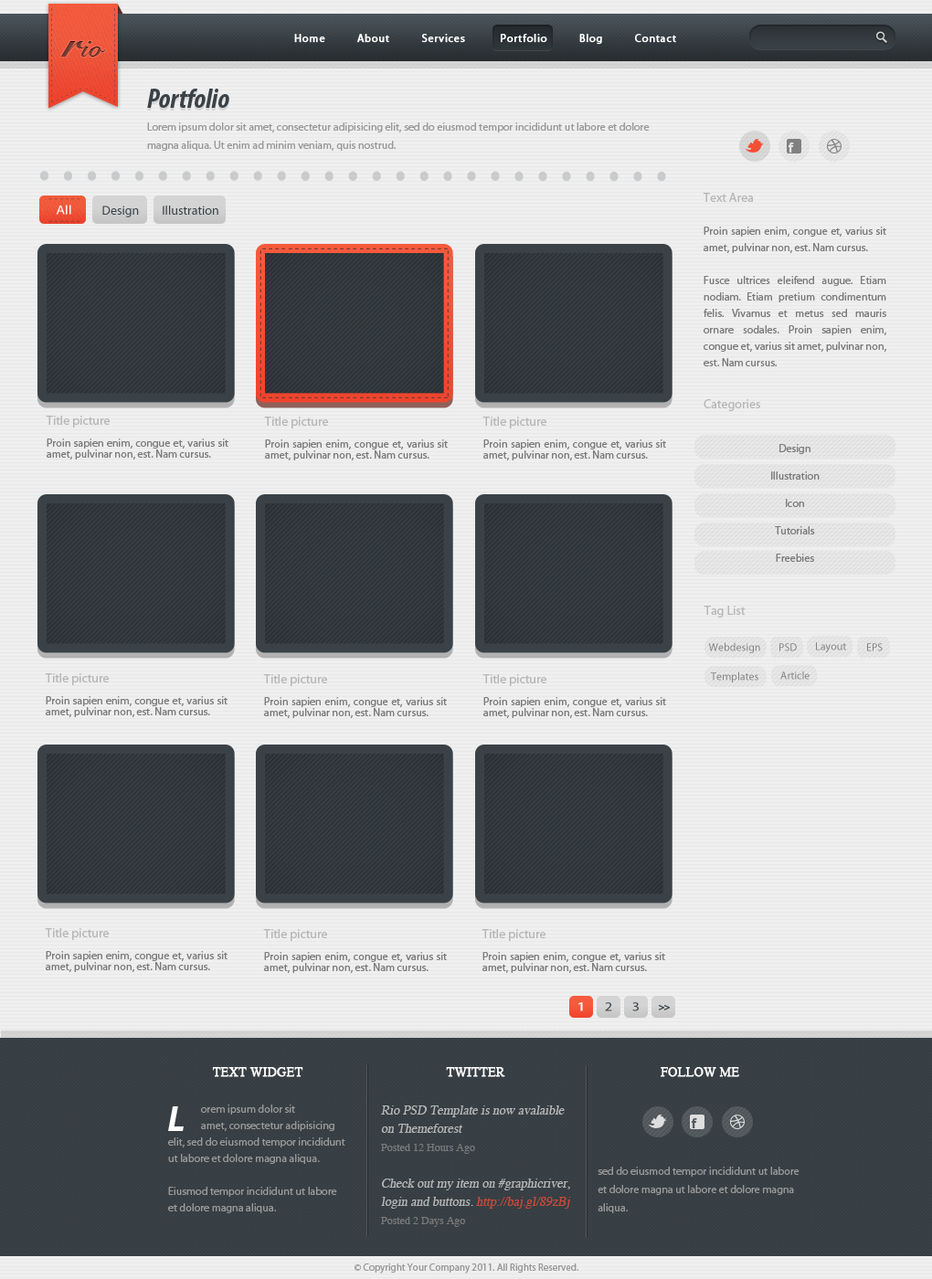
<style>
.page{position:relative;width:932px;height:1279px}
.page>*{position:absolute;margin:0}
.t1{font:27.4px "SnellRoundhand-Bold";color:#783c32}
.t2{font:43.9px "SnellRoundhand-Bold";color:#783c32}
.t3{font:11px "MyriadPro-Regular";letter-spacing:0.05em;color:#ffffff;font-weight:bold}
.t4{font:27.4px "MyriadPro-BoldCondIt";color:#3a4247}
.t5{font:11px/18.3px "MyriadPro-Regular";color:#999999}
.t6{font:54.8px "MyriadPro-BoldCond";letter-spacing:0.2em;color:#cbcccd}
.t7{font:11px/16.4px "MyriadPro-Regular";color:#7b7b7b}
.t8{font:12.8px/32.9px "MyriadPro-Regular";color:#b6b6b6}
.t9{font:12.7px "MyriadPro-Regular";color:#ffffff;scale:1.15 1}
.t10{font:12.8px "MyriadPro-Regular";color:#3a4247}
.t11{font:11px/27.4px "MyriadPro-Regular";color:#7b7b7b}
.t12{font:11px/11px "MyriadPro-Regular";color:#7b7b7b}
.t13{font:12.8px/11px "MyriadPro-Regular";color:#b6b6b6}
.t14{font:12.8px "MyriadPro-Regular";color:#b6b6b6}
.t15{font:11px "MyriadPro-Regular";color:#808080}
.t16{font:12.8px "MyriadPro-Semibold";color:#ffffff;scale:1.15 1}
.t17{font:12.8px "MyriadPro-Regular";color:#3a4247;scale:1.15 1}
.t18{font:9.1px "MyriadPro-Semibold";letter-spacing:-0.1em;color:#3a4247;font-weight:bold;scale:1.15 1}
.t19{font:11px/16.4px "MyriadPro-Regular";color:#999999}
.t20{font:12.8px/20.1px "Times-Roman";color:#ffffff;text-transform:uppercase;font-weight:bold}
.t21{font:12.8px/18.3px "Times-Roman";color:#b6b6b6;font-style:italic}
.t22{font:11px/18.3px "Times-Roman";color:#7a7a7a}
.t23{font:12.8px/18.3px "Times-Roman";color:#c9493b;font-style:italic}
.t24{font:36.6px "MyriadPro-BoldIt";color:#ffffff}
.t25{font:10.1px "MyriadPro-Regular";color:#999999}
</style>
<div class="page">
<p class="t1" style="left:61px;top:41px;width:45px;height:16px"><span class="t2">r</span>io</p>
<p class="t3" style="left:294px;top:34px;width:382px;height:11px">Home          About          Services           Portfolio          Blog          Contact</p>
<p class="t4" style="left:147px;top:89px;width:82px;height:19px">Portfolio</p>
<p class="t5" style="left:147px;top:122px;width:503px;height:29px">Lorem ipsum dolor sit amet, consectetur adipisicing elit, sed do eiusmod tempor incididunt ut labore et dolore magna aliqua. Ut enim ad minim veniam, quis nostrud.</p>
<p class="t6" style="left:40px;top:171px;width:626px;height:11px">...........................</p>
<p class="t7" style="left:703px;top:193px;width:183px;height:173px;text-align:justify"><span class="t8">Text Area<br><br></span>Proin sapien enim, congue et, varius sit amet, pulvinar non, est. Nam cursus.<br><br>Fusce ultrices eleifend augue. Etiam nodiam. Etiam pretium condimentum felis. Vivamus et metus sed mauris ornare sodales. Proin sapien enim, congue et, varius sit amet, pulvinar non, est. Nam cursus.</p>
<p class="t9" style="left:56px;top:205px;width:15px;height:10px">All</p>
<p class="t10" style="left:102px;top:206px;width:37px;height:11px">Design</p>
<p class="t10" style="left:163px;top:206px;width:55px;height:9px">Illustration</p>
<p class="t11" style="left:704px;top:399px;width:116px;height:163px;text-align:justify"><span class="t8">Categories<br><br></span>Design<br>Illustration<br>Icon<br>Tutorials<br>Freebies</p>
<p class="t12" style="left:46px;top:416px;width:182px;height:44px;text-align:justify"><span class="t13">Title picture<br><br></span>Proin sapien enim, congue et, varius sit amet, pulvinar non, est. Nam cursus.</p>
<p class="t12" style="left:264px;top:417px;width:184px;height:44px;text-align:justify"><span class="t13">Title picture<br><br></span>Proin sapien enim, congue et, varius sit amet, pulvinar non, est. Nam cursus.</p>
<p class="t12" style="left:482px;top:417px;width:184px;height:44px;text-align:justify"><span class="t13">Title picture<br><br></span>Proin sapien enim, congue et, varius sit amet, pulvinar non, est. Nam cursus.</p>
<p class="t14" style="left:704px;top:606px;width:42px;height:12px">Tag List</p>
<p class="t15" style="left:708px;top:642px;width:52px;height:11px">Webdesign</p>
<p class="t15" style="left:779px;top:643px;width:18px;height:9px">PSD</p>
<p class="t15" style="left:816px;top:642px;width:30px;height:10px">Layout</p>
<p class="t15" style="left:867px;top:643px;width:16px;height:9px">EPS</p>
<p class="t12" style="left:45px;top:673px;width:183px;height:44px;text-align:justify"><span class="t13">Title picture<br><br></span>Proin sapien enim, congue et, varius sit amet, pulvinar non, est. Nam cursus.</p>
<p class="t12" style="left:263px;top:674px;width:184px;height:44px;text-align:justify"><span class="t13">Title picture<br><br></span>Proin sapien enim, congue et, varius sit amet, pulvinar non, est. Nam cursus.</p>
<p class="t12" style="left:482px;top:674px;width:184px;height:44px;text-align:justify"><span class="t13">Title picture<br><br></span>Proin sapien enim, congue et, varius sit amet, pulvinar non, est. Nam cursus.</p>
<p class="t15" style="left:711px;top:672px;width:47px;height:11px">Templates</p>
<p class="t15" style="left:780px;top:671px;width:30px;height:9px">Article</p>
<p class="t12" style="left:45px;top:928px;width:183px;height:44px;text-align:justify"><span class="t13">Title picture<br><br></span>Proin sapien enim, congue et, varius sit amet, pulvinar non, est. Nam cursus.</p>
<p class="t12" style="left:263px;top:929px;width:184px;height:44px;text-align:justify"><span class="t13">Title picture<br><br></span>Proin sapien enim, congue et, varius sit amet, pulvinar non, est. Nam cursus.</p>
<p class="t12" style="left:482px;top:929px;width:183px;height:44px;text-align:justify"><span class="t13">Title picture<br><br></span>Proin sapien enim, congue et, varius sit amet, pulvinar non, est. Nam cursus.</p>
<p class="t16" style="left:578px;top:1002px;width:5px;height:10px">1</p>
<p class="t17" style="left:605px;top:1002px;width:7px;height:10px">2</p>
<p class="t17" style="left:632px;top:1002px;width:7px;height:10px">3</p>
<p class="t18" style="left:659px;top:1005px;width:11px;height:6px">&gt;&gt;</p>
<p class="t19" style="left:168px;top:1067px;width:177px;height:147px;text-align:center"><span class="t20">Text Widget<br><br></span> orem ipsum dolor sit     amet, consectetur adipisicing elit, sed do eiusmod tempor incididunt ut labore et dolore magna aliqua. <br><br>Eiusmod tempor incididunt ut labore et dolore magna aliqua.</p>
<p class="t21" style="left:381px;top:1067px;width:190px;height:160px;text-align:center"><span class="t20">Twitter<br><br></span>Rio PSD Template is now avalaible on Themeforest<br><span class="t22">Posted 12 Hours Ago<br><br></span>Check out my item on #graphicriver, <br>login and buttons. <span class="t23">http://baj.gl/89zBj<br></span><span class="t22">Posted 2 Days Ago</span></p>
<p class="t5" style="left:598px;top:1067px;width:202px;height:147px;text-align:center"><span class="t20">Follow me<br><br><br><br><br></span>sed do eiusmod tempor incididunt ut labore et dolore magna ut labore et dolore magna aliqua.</p>
<p class="t24" style="left:168px;top:1107px;width:16px;height:24px">L</p>
<p class="t25" style="left:355px;top:1264px;width:223px;height:10px">© Copyright Your Company 2011. All Rights Reserved.</p>
</div>
